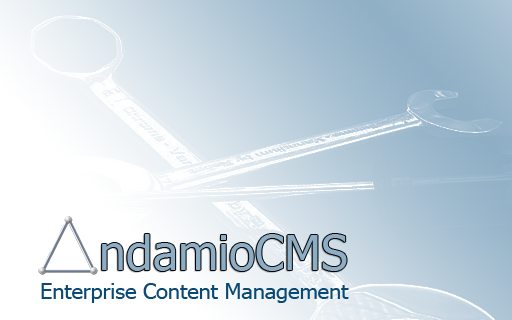
<style>
.page{position:relative;width:512px;height:320px}
.page>*{position:absolute;margin:0}
.t1{font:48px "Tahoma";color:#8cadc4}
.t2{font:21px "Tahoma";color:#0b4975;scale:1.03 1}
</style>
<div class="page">
<p class="t1" style="left:102px;top:234px;width:245px;height:37px">ndamioCMS</p>
<p class="t2" style="left:41px;top:283px;width:308px;height:20px">Enterprise Content Management</p>
</div>
